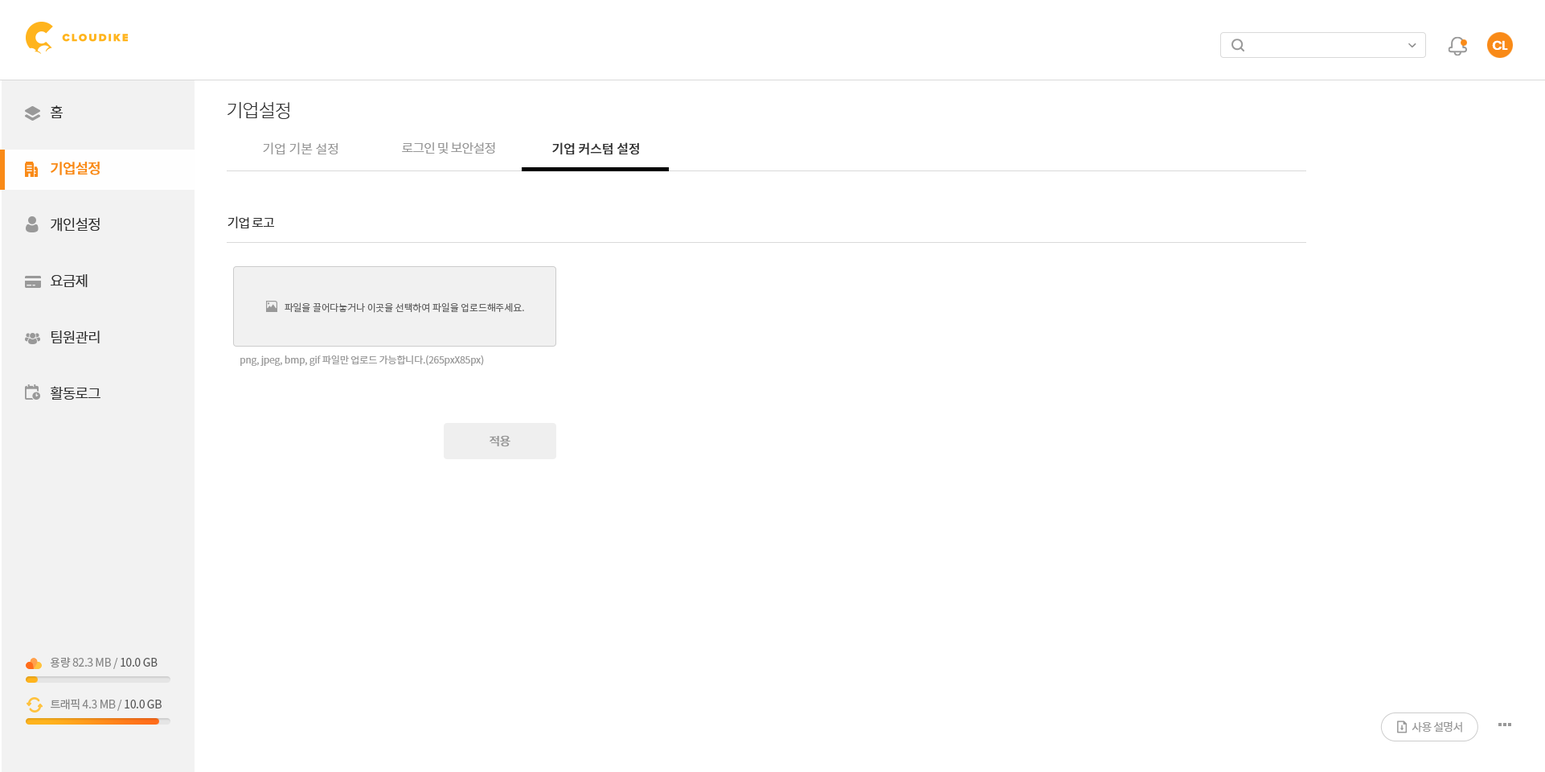
<style>
.page{position:relative;width:1545px;height:772px;background:#ffffff}
.page>*{position:absolute;margin:0}
.t1{font:12.9px "Poppins-SemiBold";letter-spacing:-0.05em;color:#ffffff}
.t2{font:18.5px "NotoSansCJKkr-Light";letter-spacing:-0.05em;color:#333333}
.t3{font:14.5px/56.3px "NotoSansCJKkr-DemiLight";letter-spacing:-0.05em;color:#333333}
.t4{font:14.5px/56.3px "NotoSansCJKkr-Medium";letter-spacing:-0.05em;color:#f98a17}
.t5{font:12.9px "NotoSansCJKkr-DemiLight";color:#999999}
.t6{font:12.9px "NotoSansCJKkr-DemiLight";letter-spacing:-0.05em;color:#999999}
.t7{font:12.9px "NotoSansCJKkr-Medium";color:#333333}
.t8{font:12.9px "NotoSansCJKkr-Regular";letter-spacing:-0.05em;color:#333333}
.t9{font:9.6px "NotoSansCJKkr-DemiLight";letter-spacing:-0.01em;color:#666666}
.t10{font:9.6px "NotoSansCJKkr-DemiLight";letter-spacing:-0.01em;color:#999999}
.t11{font:12.1px "NotoSansCJKkr-Medium";letter-spacing:-0.05em;color:#999999}
.t12{font:11.3px "NotoSansCJKkr-Regular";letter-spacing:-0.025em;color:#888888}
.t13{font:11.3px "NotoSansCJKkr-Regular";letter-spacing:-0.025em;color:#585858}
.t14{font:11.3px "NotoSansCJKkr-Regular";letter-spacing:-0.05em;color:#999999}
</style>
<div class="page">
<p class="t1" style="left:1492px;top:40px;width:16px;height:10px">CL</p>
<p class="t2" style="left:228px;top:101px;width:61px;height:18px">기업설정</p>
<p class="t3" style="left:51px;top:105px;width:49px;height:295px">홈<br><span class="t4">기업설정<br></span>개인설정<br>요금제<br>팀원관리<br>활동로그</p>
<p class="t5" style="left:263px;top:142px;width:75px;height:12px">기업 기본 설정</p>
<p class="t6" style="left:402px;top:142px;width:93px;height:12px">로그인 및 보안설정</p>
<p class="t7" style="left:552px;top:142px;width:87px;height:13px">기업 커스텀 설정</p>
<p class="t8" style="left:228px;top:216px;width:46px;height:12px">기업 로고</p>
<p class="t9" style="left:285px;top:302px;width:239px;height:11px">파일을 끌어다놓거나 이곳을 선택하여 파일을 업로드해주세요.</p>
<p class="t10" style="left:240px;top:355px;width:244px;height:11px">png, jpeg, bmp, gif 파일만 업로드 가능합니다.(265pxX85px)</p>
<p class="t11" style="left:490px;top:435px;width:20px;height:12px">적용</p>
<p class="t12" style="left:50px;top:657px;width:108px;height:12px">용량 82.3 MB / <span class="t13">10.0 GB</span></p>
<p class="t12" style="left:51px;top:699px;width:111px;height:12px">트래픽 4.3 MB / <span class="t13">10.0 GB</span></p>
<p class="t14" style="left:1412px;top:721px;width:50px;height:11px">사용 설명서</p>
</div>
